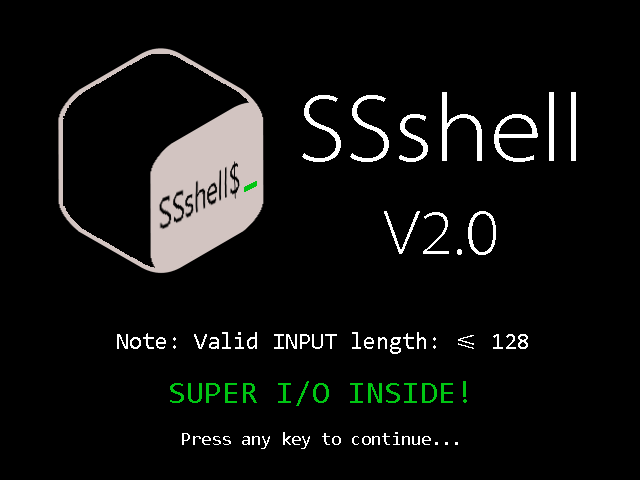
<style>
.page{position:relative;width:640px;height:480px;background:#000000}
.page>*{position:absolute;margin:0}
.t1{font:96px "ZHSRXT--GBK1-0";color:#ffffff}
.t2{font:64px "ZHSRXT--GBK1-0";color:#ffffff}
.t3{font:24px "Consolas";color:#ffffff}
.t4{font:24px "FZSXSLKJW--GB1-0";color:#ffffff}
.t5{font:32px "Consolas";color:#00c513}
.t6{font:18.7px "Consolas";color:#ffffff}
</style>
<div class="page">
<p class="t1" style="left:302px;top:92px;width:274px;height:70px">SSshell</p>
<p class="t2" style="left:384px;top:211px;width:112px;height:44px">V2.0</p>
<p class="t3" style="left:117px;top:332px;width:411px;height:22px">Note: Valid INPUT length: <span class="t4">≤</span> 128</p>
<p class="t5" style="left:170px;top:381px;width:297px;height:25px">SUPER I/O INSIDE!</p>
<p class="t6" style="left:182px;top:432px;width:276px;height:17px">Press any key to continue...</p>
</div>
